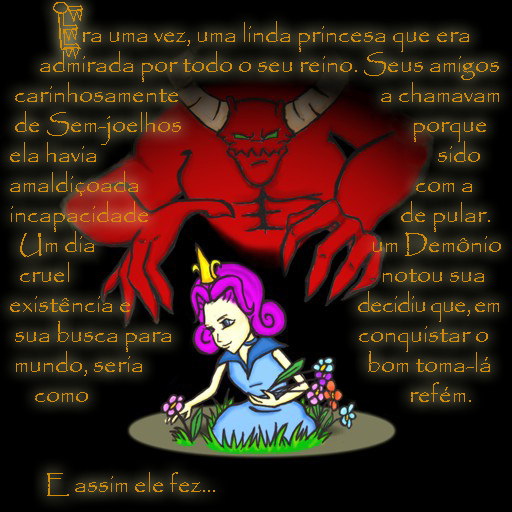
<style>
.page{position:relative;width:512px;height:512px;background:#000000}
.page>*{position:absolute;margin:0}
.t1{font:25px/30px "Papyrus-Regular";color:#d18b07}
.t2{font:25px/30px "Papyrus-Regular";letter-spacing:-0.04em;color:#d18b07}
</style>
<div class="page">
<p class="t1" style="left:10px;top:21px;width:491px;height:475px">ra uma vez, uma linda princesa que era<br>      admirada por todo o seu reino. Seus amigos<br> carinhosamente                                        a chamavam<br> de Sem-joelhos                                              porque                                                   <br>ela havia                                                                    sido<br>amaldiçoada                                                       com a<br>incapacidade                                                  de pular.<br>  Um dia                                                       um Demônio<br>  cruel                                                              notou sua <br>existência e                                             <span class="t2">decidiu que, em<br></span> sua busca para                                      conquistar o<br> mundo, seria                                            bom toma-lá<br>     como                                                                refém.<br><br><br>       E assim ele fez...</p>
</div>
